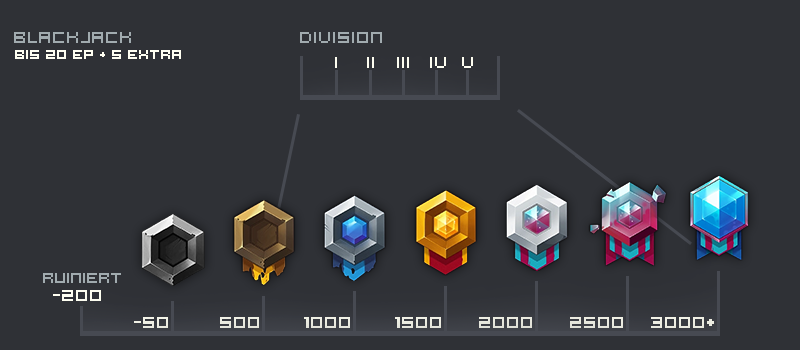
<style>
.page{position:relative;width:800px;height:350px;background:#2f3136}
.page>*{position:absolute;margin:0}
.t1{font:18px "Hooge0553";color:#a1abaf}
.t2{font:14px "Hooge0553";color:#fffff2}
.t3{font:18px "Hooge0553";color:#fdfdf0}
.t4{font:16px "Hooge0553";color:#a1abaf}
.t5{font:18px "Hooge0553";color:#fffff2}
.t6{font:18px "Hooge0553";color:#f0f0e5}
.t7{font:18px "Hooge0553";color:#ebebe0}
.t8{font:18px "Hooge0553";color:#e6e6dc}
.t9{font:18px "Hooge0553";color:#e7e8dd}
.t10{font:18px "Hooge0553";color:#eeeee3}
</style>
<div class="page">
<p class="t1" style="left:14px;top:32px;width:117px;height:11px">Blackjack</p>
<p class="t1" style="left:300px;top:32px;width:82px;height:11px">Division</p>
<p class="t2" style="left:15px;top:50px;width:166px;height:9px">Bis 20 EP + 5 extra</p>
<p class="t3" style="left:367px;top:57px;width:7px;height:11px">II</p>
<p class="t3" style="left:397px;top:57px;width:12px;height:11px">III</p>
<p class="t3" style="left:430px;top:57px;width:16px;height:11px">IV</p>
<p class="t3" style="left:462px;top:57px;width:11px;height:11px">V</p>
<p class="t4" style="left:43px;top:273px;width:78px;height:10px">Ruiniert</p>
<p class="t5" style="left:53px;top:290px;width:48px;height:11px">-200</p>
<p class="t6" style="left:134px;top:317px;width:34px;height:11px">-50</p>
<p class="t7" style="left:220px;top:317px;width:39px;height:11px">500</p>
<p class="t7" style="left:304px;top:317px;width:46px;height:11px">1000</p>
<p class="t7" style="left:395px;top:317px;width:46px;height:11px">1500</p>
<p class="t8" style="left:479px;top:317px;width:53px;height:11px">2000</p>
<p class="t9" style="left:570px;top:317px;width:53px;height:11px">2500</p>
<p class="t10" style="left:651px;top:317px;width:63px;height:11px">3000+</p>
</div>
